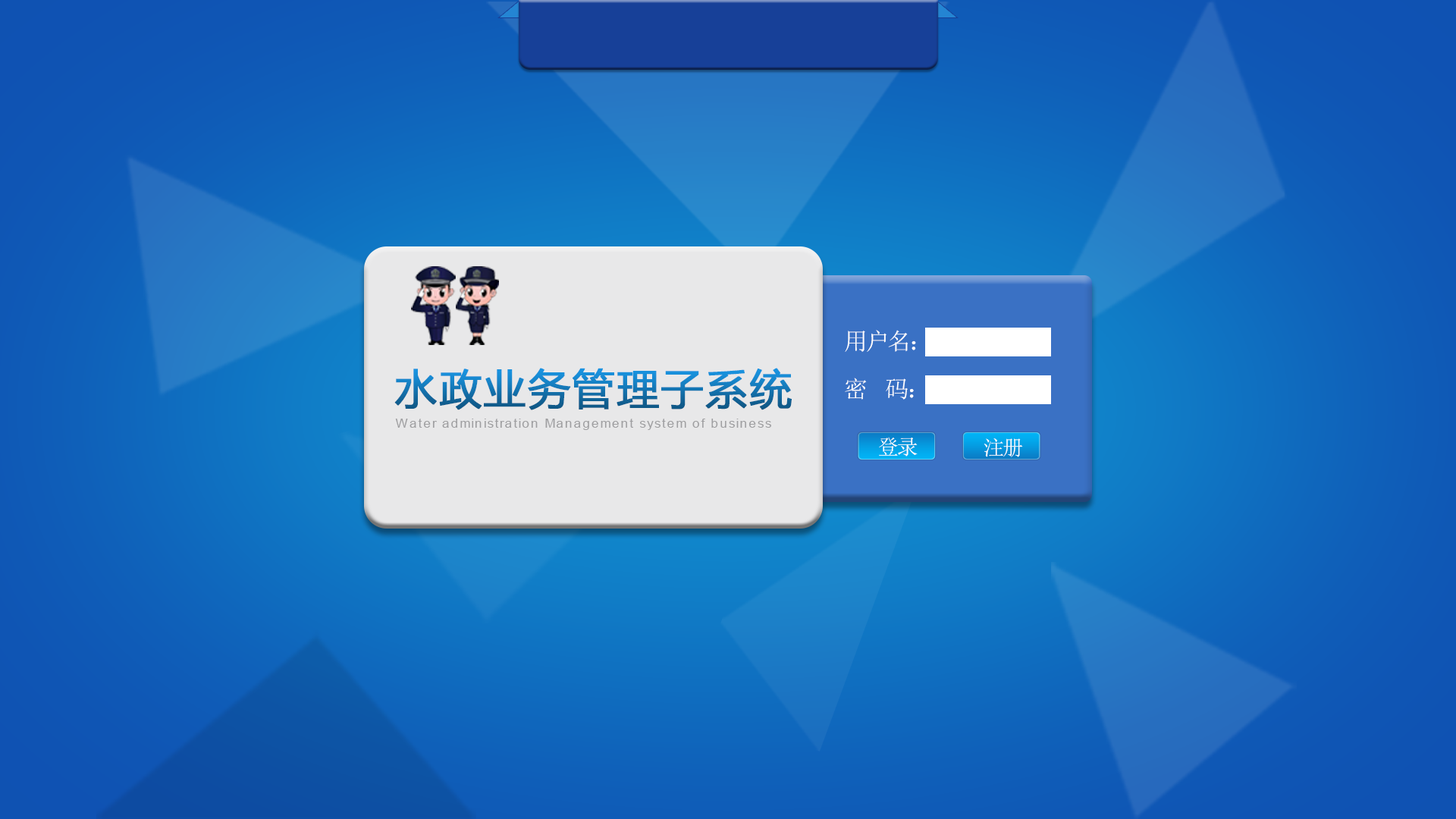
<style>
.page{position:relative;width:1456px;height:819px}
.page>*{position:absolute;margin:0}
.t1{font:23.6px "SimSun";letter-spacing:-0.085em;color:#ffffff}
.t2{font:42px "MicrosoftYaHei";letter-spacing:0.025em;font-weight:bold}
.t3{font:13.1px "ArialMT";letter-spacing:0.075em;color:#9f9fa1}
.t4{font:21px "AdobeHeitiStd-Regular";letter-spacing:-0.085em;color:#ffffff}
</style>
<div class="page">
<p class="t1" style="left:845px;top:330px;width:71px;height:22px">用户名：</p>
<p class="t2" style="left:394px;top:368px;width:398px;height:42px">水政业务管理子系统</p>
<p class="t1" style="left:845px;top:378px;width:69px;height:22px">密  码：</p>
<p class="t3" style="left:395px;top:419px;width:376px;height:11px">Water administration Management system of business</p>
<p class="t4" style="left:879px;top:437px;width:39px;height:20px">登录</p>
<p class="t4" style="left:984px;top:438px;width:39px;height:19px">注册</p>
</div>
